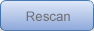
<style>
.page{position:relative;width:94px;height:31px}
.page>*{position:absolute;margin:0}
.t1{font:13.3px "ArialMT";color:#6e6e6e}
</style>
<div class="page">
<p class="t1" style="left:26px;top:11px;width:44px;height:10px">Rescan</p>
</div>
